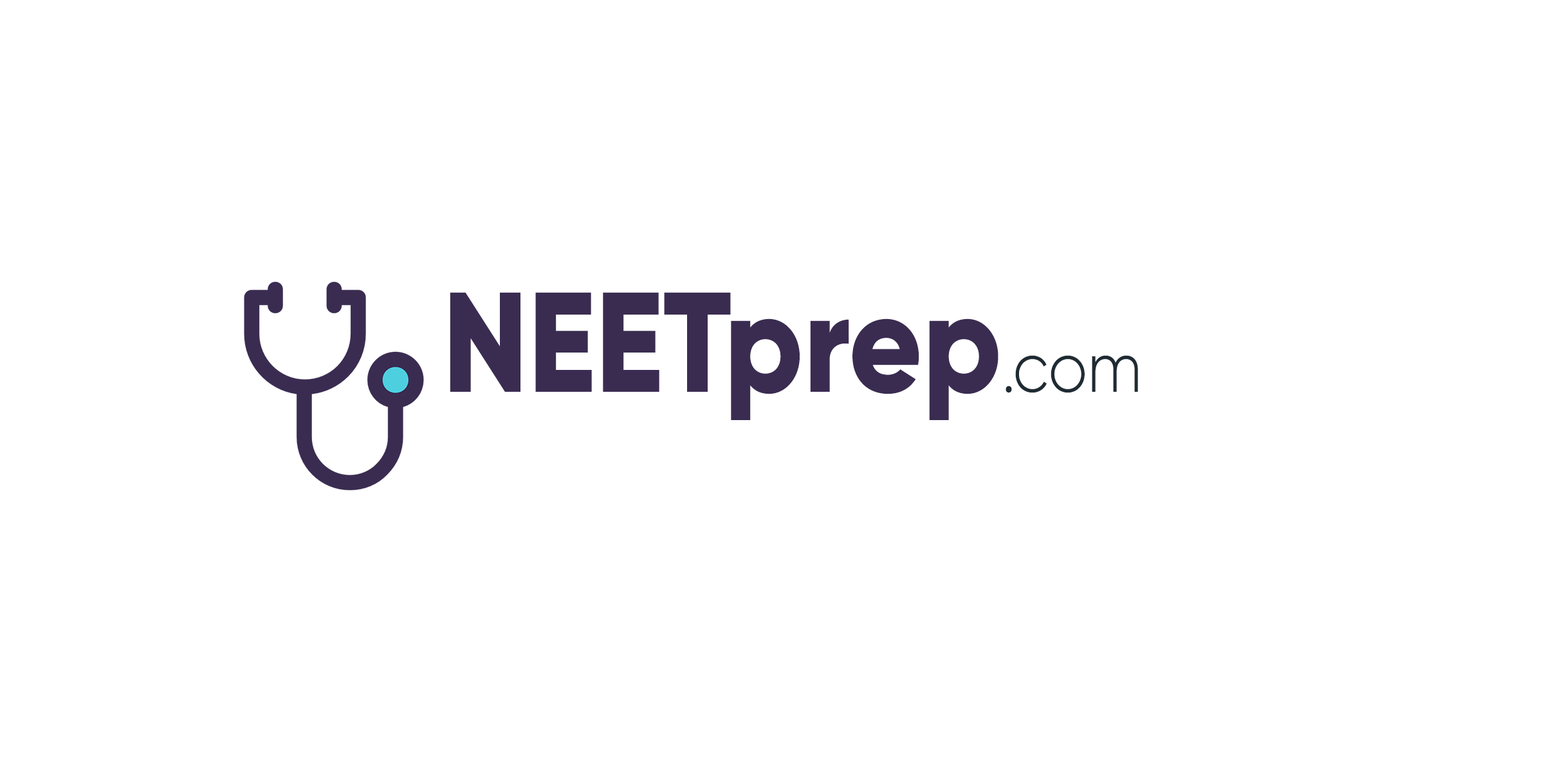
<style>
.page{position:relative;width:1544px;height:772px;background:#ffffff}
.page>*{position:absolute;margin:0}
.t1{font:141.6px "Gilroy-ExtraBold";color:#3a2c51;scale:0.9 1}
.t2{font:70.8px "Gilroy-Light";color:#1f2b33;scale:0.9 1}
</style>
<div class="page">
<p class="t1" style="left:450px;top:292px;width:688px;height:128px">NEETprep<span class="t2">.com</span></p>
</div>
